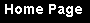
<style>
.page{position:relative;width:90px;height:23px;background:#000000}
.page>*{position:absolute;margin:0}
.t1{font:14px "Arial-BoldMT";color:#ffffff}
</style>
<div class="page">
<p class="t1" style="left:5px;top:4px;width:77px;height:13px">Home Page</p>
</div>
